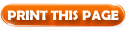
<style>
.page{position:relative;width:126px;height:30px;background:#ffffff}
.page>*{position:absolute;margin:0}
.t1{font:14px "BerlinSansFBDemi-Bold";color:#ffffff;text-transform:uppercase}
</style>
<div class="page">
<p class="t1" style="left:7px;top:10px;width:112px;height:10px">print this page</p>
</div>
